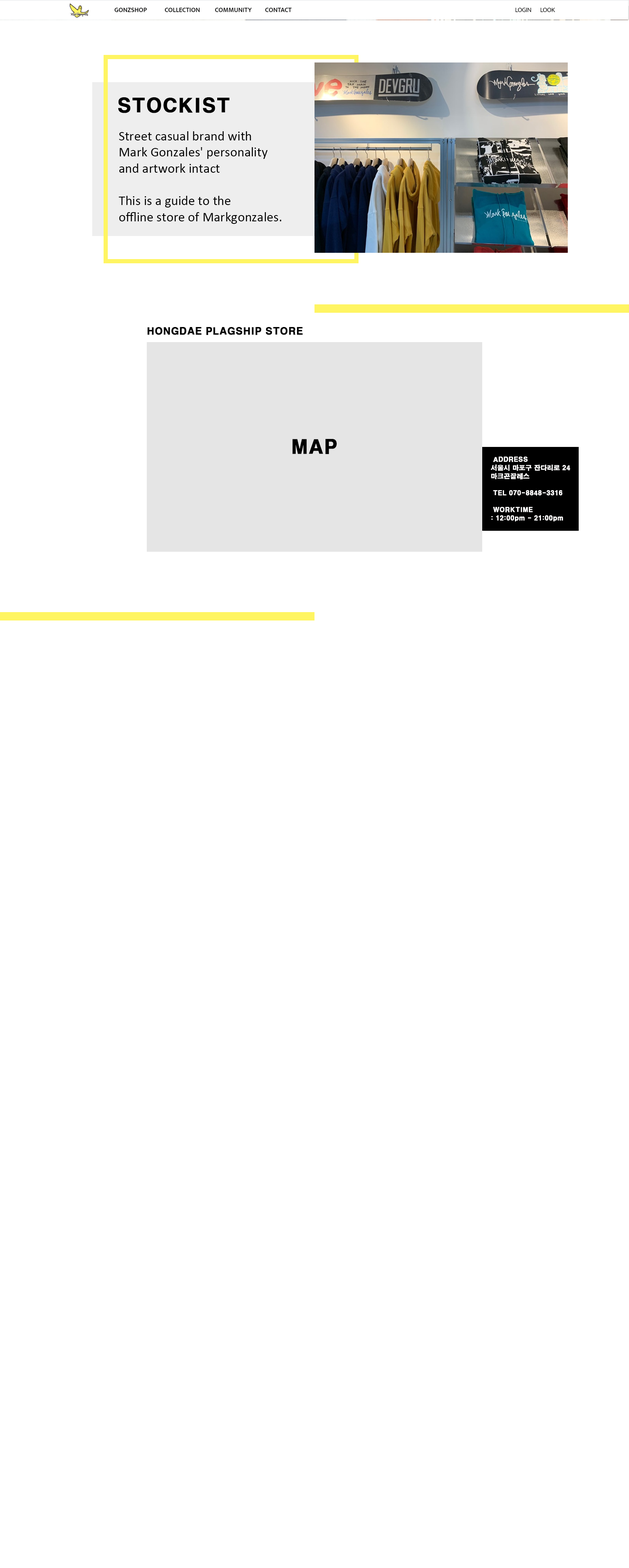
<style>
.page{position:relative;width:629px;height:1568px;background:#ffffff}
.page>*{position:absolute;margin:0}
.t1{font:19px "H2gtrE";color:#000000;font-weight:bold}
.t2{font:13.5px "Calibri";color:#000000}
.t3{font:9.6px "H2gtrE";color:#000000;font-weight:bold}
</style>
<div class="page">
<p class="t1" style="left:118px;top:97px;width:112px;height:16px">STOCKIST</p>
<p class="t2" style="left:119px;top:131px;width:162px;height:93px">Street casual brand with<br>Mark Gonzales' personality<br>and artwork intact<br><br>This is a guide to the<br>offline store of Markgonzales.</p>
<p class="t3" style="left:147px;top:327px;width:156px;height:8px">HONGDAE PLAGSHIP STORE</p>
</div>
